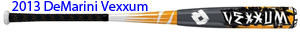
<style>
.page{position:relative;width:300px;height:32px;background:#ffffff}
.page>*{position:absolute;margin:0}
.t1{font:14px "MyriadPro-Regular";color:#0000ff}
</style>
<div class="page">
<p class="t1" style="left:12px;top:1px;width:136px;height:10px">2013 DeMarini Vexxum</p>
</div>
